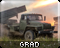
<style>
.page{position:relative;width:60px;height:48px}
.page>*{position:absolute;margin:0}
.t1{font:10px "CAMEO-RA2";letter-spacing:0.005em}
</style>
<div class="page">
<p class="t1" style="left:20px;top:42px;width:19px;height:5px">GRAD</p>
</div>
